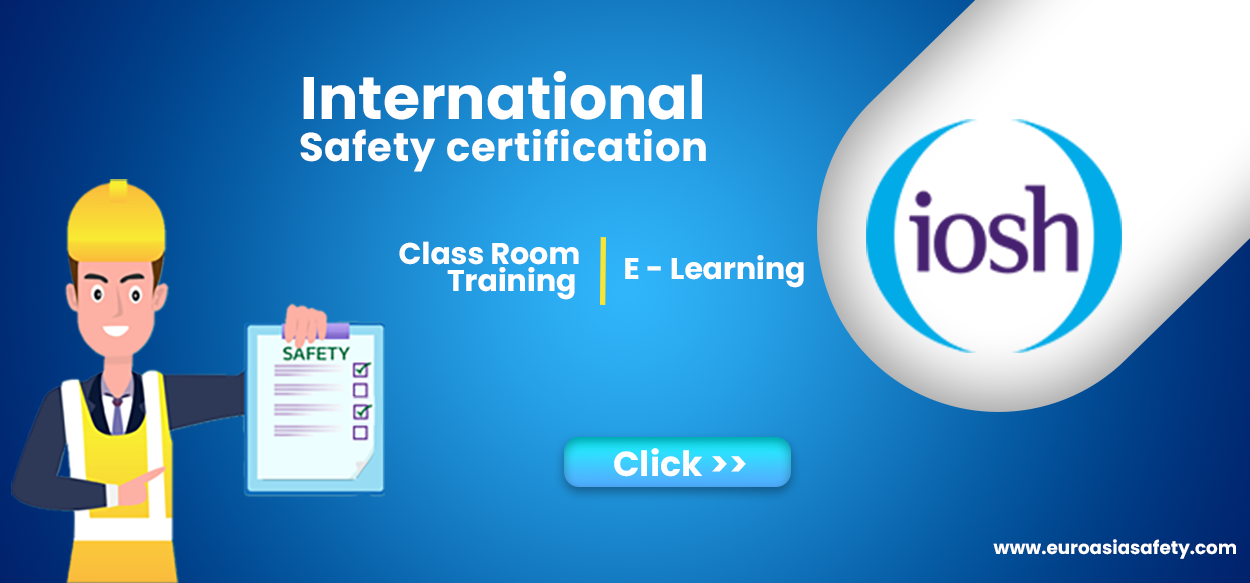
<style>
.page{position:relative;width:1250px;height:583px}
.page>*{position:absolute;margin:0}
.t1{font:60px "Poppins-Bold";color:#ffffff}
.t2{font:40px "Poppins-Bold";letter-spacing:0.022em;color:#ffffff}
.t3{font:30px "Poppins-Bold";color:#ffffff}
.t4{font:34.7px "Poppins-Bold";color:#ffffff}
.t5{font:18.3px "Poppins-Bold";color:#ffffff}
</style>
<div class="page">
<p class="t1" style="left:303px;top:71px;width:399px;height:49px">International</p>
<p class="t2" style="left:300px;top:129px;width:406px;height:43px">Safety certification</p>
<p class="t3" style="left:399px;top:241px;width:180px;height:24px">Class Room</p>
<p class="t3" style="left:625px;top:255px;width:179px;height:33px">E - Learning</p>
<p class="t3" style="left:447px;top:267px;width:128px;height:33px">Training</p>
<p class="t4" style="left:614px;top:448px;width:132px;height:29px">Click &gt;&gt;</p>
<p class="t5" style="left:993px;top:539px;width:243px;height:20px">www.euroasiasafety.com</p>
</div>
